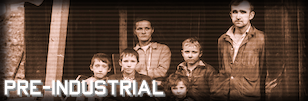
<style>
.page{position:relative;width:308px;height:101px}
.page>*{position:absolute;margin:0}
.t1{font:17.3px "ACES_MIL-STD-2161C";color:#ffffff}
</style>
<div class="page">
<p class="t1" style="left:4px;top:80px;width:160px;height:15px">pre-industrial</p>
</div>
